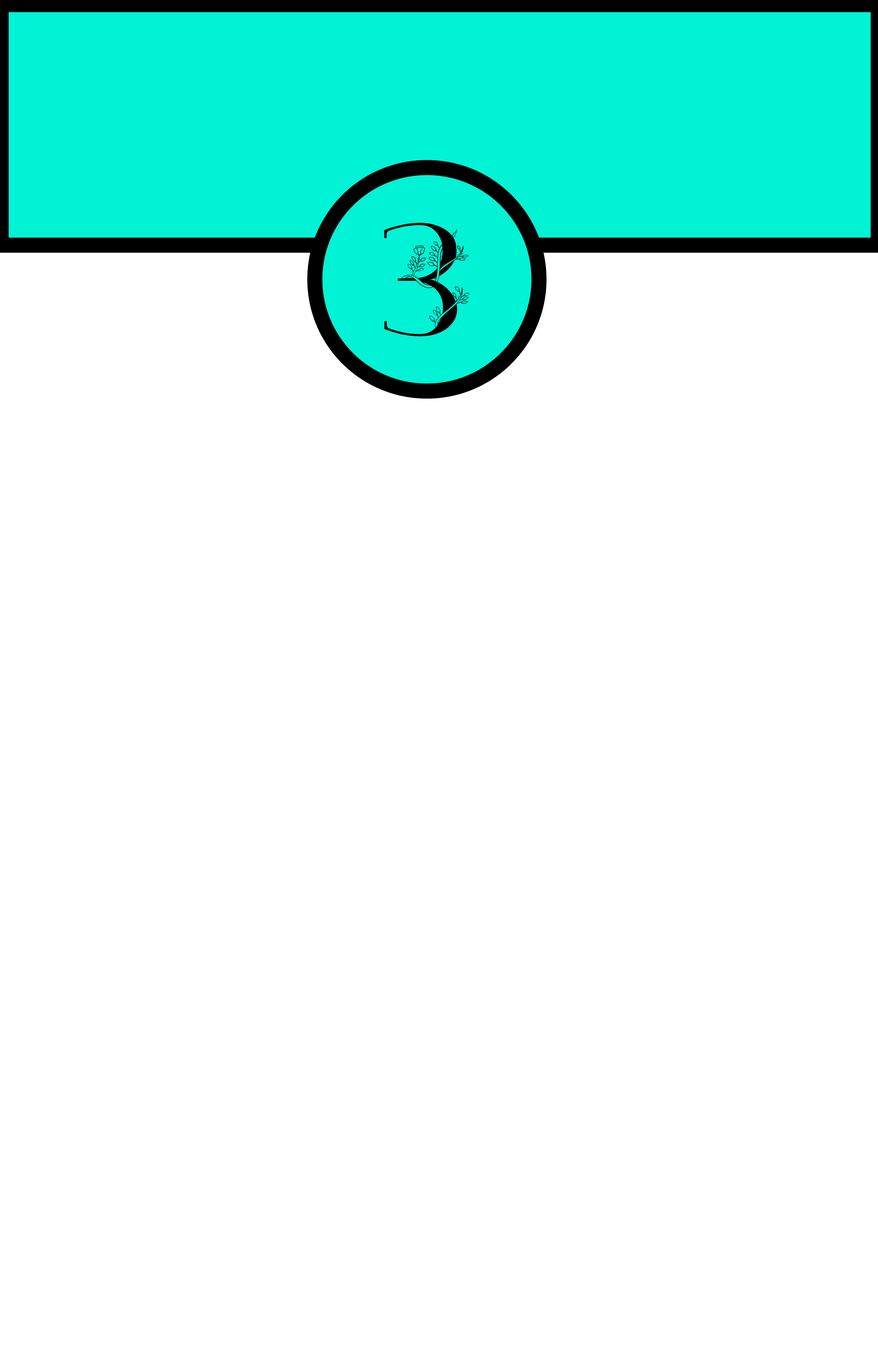
<style>
.page{position:relative;width:878px;height:1358px;background:#ffffff}
.page>*{position:absolute;margin:0}
.t1{font:169.5px "Plante";color:#000000}
</style>
<div class="page">
<p class="t1" style="left:384px;top:223px;width:86px;height:113px">3</p>
</div>
